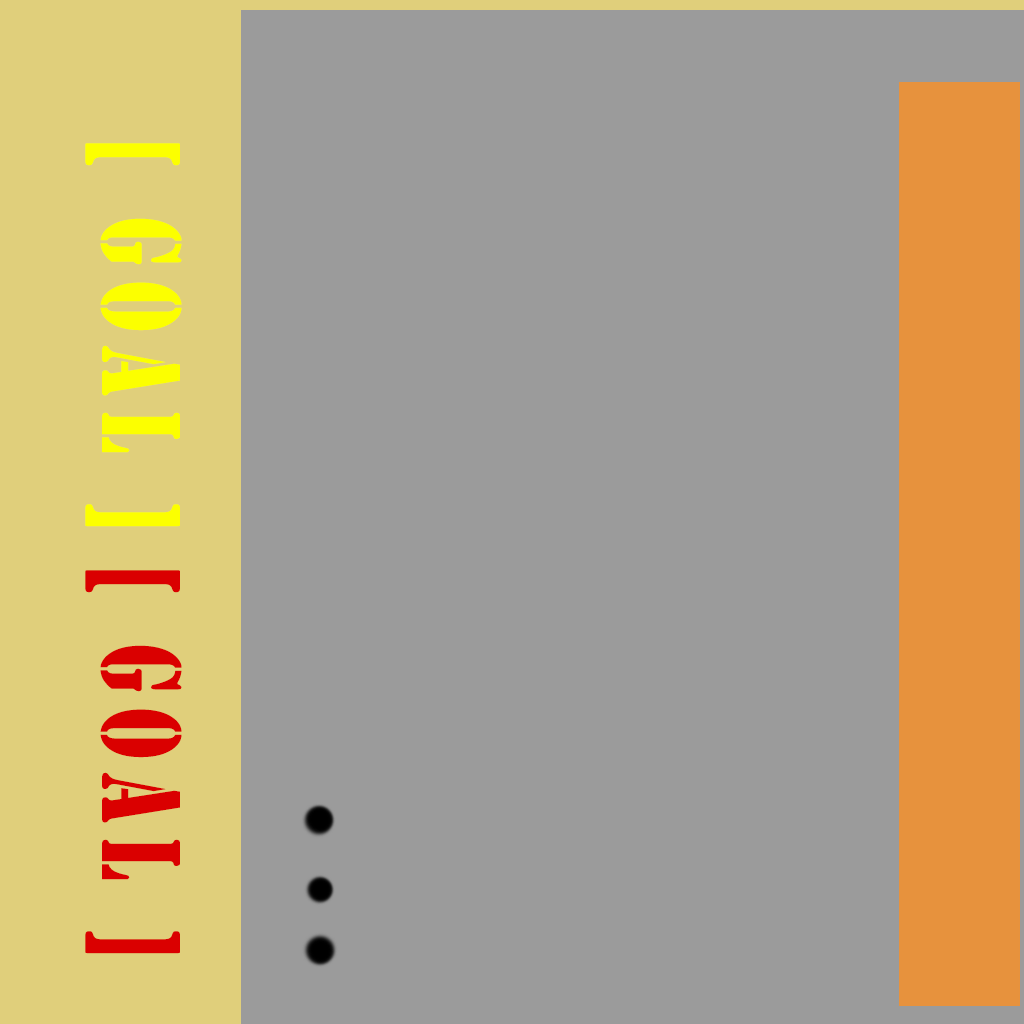
<style>
.page{position:relative;width:1024px;height:1024px;background:#9b9b9b}
.page>*{position:absolute;margin:0}
.t1{font:116.6px "Stencil";letter-spacing:0.18em;color:#fcff00;scale:0.68 1}
.t2{font:116.6px "Stencil";letter-spacing:0.18em;color:#da0000;scale:0.68 1}
</style>
<div class="page">
<p class="t1" style="left:85px;top:143px;width:97px;height:384px;rotate:90deg">[ GOAL ]</p>
<p class="t2" style="left:85px;top:570px;width:97px;height:384px;rotate:90deg">[ GOAL ]</p>
</div>
